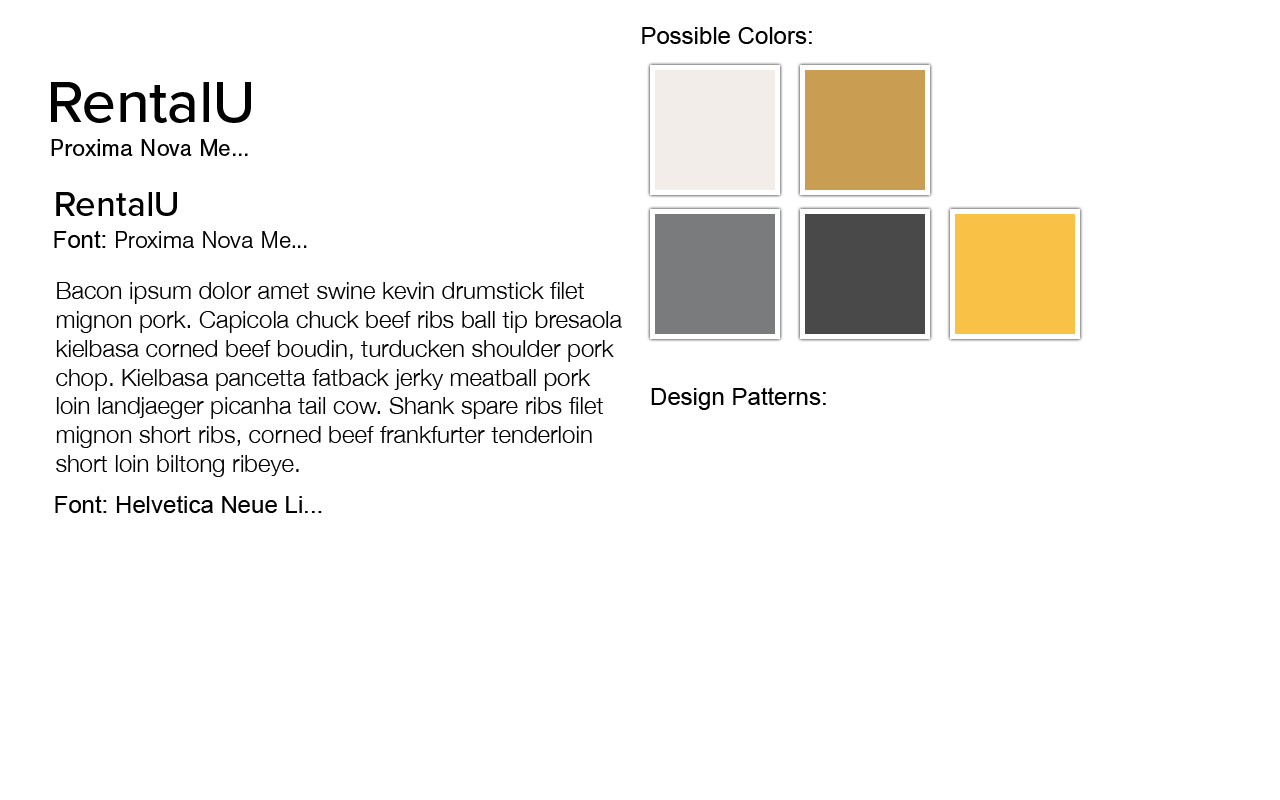
<style>
.page{position:relative;width:1280px;height:800px;background:#ffffff}
.page>*{position:absolute;margin:0}
.t1{font:24px "ArialMT";color:#000000}
.t2{font:60px "ProximaNova-Medium";color:#000000}
.t3{font:24px "NimbusSan-Reg";color:#000000}
.t4{font:36px "ProximaNova-Medium";color:#000000}
.t5{font:24px "NimbusSan-Lig";color:#000000}
.t6{font:24px "HelveticaNeue-Light";color:#000000}
</style>
<div class="page">
<p class="t1" style="left:642px;top:27px;width:170px;height:17px">Possible Colors:</p>
<p class="t2" style="left:51px;top:82px;width:200px;height:41px">RentalU</p>
<p class="t3" style="left:51px;top:139px;width:197px;height:17px">Proxima Nova Me...</p>
<p class="t4" style="left:56px;top:192px;width:121px;height:24px">RentalU</p>
<p class="t5" style="left:54px;top:230px;width:253px;height:18px"><span class="t1">Font: </span>Proxima Nova Me...</p>
<p class="t6" style="left:56px;top:282px;width:566px;height:195px">Bacon ipsum dolor amet swine kevin drumstick filet mignon pork. Capicola chuck beef ribs ball tip bresaola kielbasa corned beef boudin, turducken shoulder pork chop. Kielbasa pancetta fatback jerky meatball pork loin landjaeger picanha tail cow. Shank spare ribs filet mignon short ribs, corned beef frankfurter tenderloin short loin biltong ribeye.</p>
<p class="t1" style="left:651px;top:387px;width:175px;height:23px">Design Patterns:</p>
<p class="t1" style="left:55px;top:495px;width:267px;height:18px">Font: Helvetica Neue Li...</p>
</div>
